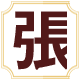
<style>
.page{position:relative;width:80px;height:80px;background:#ffffff}
.page>*{position:absolute;margin:0}
.t1{font:64.9px "AdobeGothicStd-Bold";color:#521919}
</style>
<div class="page">
<p class="t1" style="left:13px;top:11px;width:54px;height:59px">張</p>
</div>
